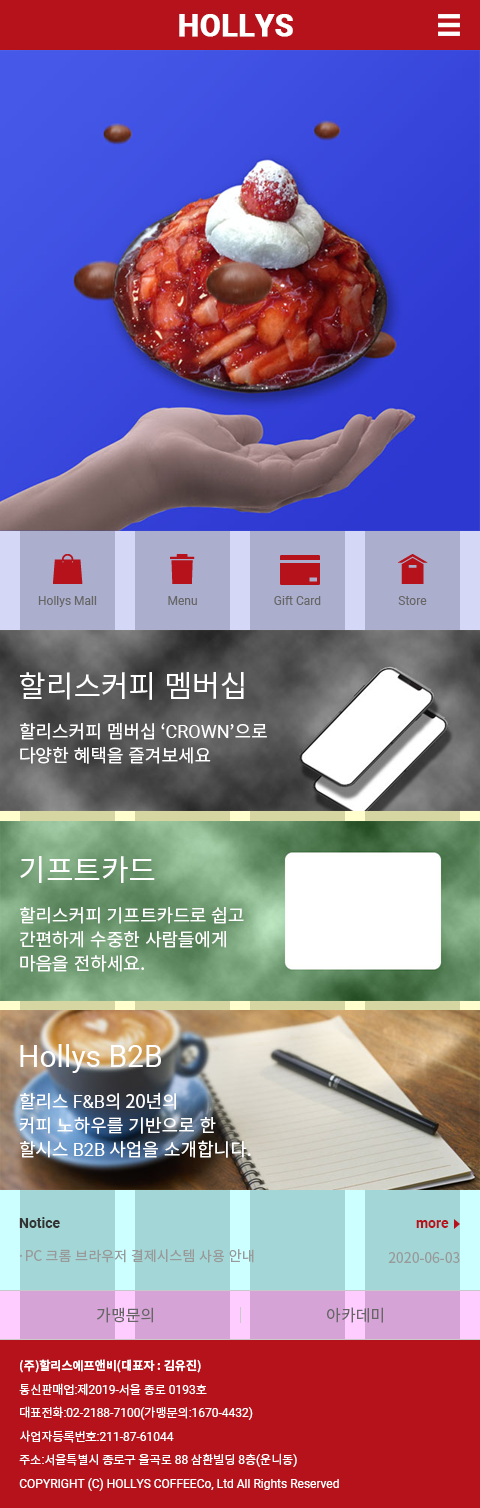
<style>
.page{position:relative;width:480px;height:1508px}
.page>*{position:absolute;margin:0}
.t1{font:30px "Roboto-Bold";color:#ffffff;font-weight:bold}
.t2{font:12px "Roboto-Regular";color:#666666}
.t3{font:30px "NotoSansKR-Regular";color:#ffffff}
.t4{font:18px/24px "NotoSansKR-Regular";color:#ffffff}
.t5{font:18px/24px "Roboto-Regular";color:#ffffff}
.t6{font:30px "Roboto-Regular";color:#ffffff}
.t7{font:14px "Roboto-Bold";color:#333333}
.t8{font:14px "Roboto-Bold";color:#b5121b}
.t9{font:14px "NotoSansKR-Regular";color:#999999}
.t10{font:16px "NotoSansKR-Regular";color:#666666}
.t11{font:12px "NotoSansKR-Bold";color:#ffffff}
.t12{font:12px "NotoSansKR-Regular";color:#ffffff}
.t13{font:12px "Roboto-Regular";color:#ffffff}
</style>
<div class="page">
<p class="t1" style="left:179px;top:14px;width:114px;height:23px">HOLLYS</p>
<p class="t2" style="left:38px;top:596px;width:59px;height:11px">Hollys Mall</p>
<p class="t2" style="left:168px;top:596px;width:29px;height:9px">Menu</p>
<p class="t2" style="left:274px;top:596px;width:47px;height:9px">Gift Card</p>
<p class="t2" style="left:398px;top:596px;width:29px;height:9px">Store</p>
<p class="t3" style="left:20px;top:672px;width:224px;height:28px">할리스커피 멤버십</p>
<p class="t4" style="left:20px;top:722px;width:247px;height:42px">할리스커피 멤버십 ‘<span class="t5">CROWN</span>’으로<br>다양한 혜택을 즐겨보세요</p>
<p class="t3" style="left:20px;top:856px;width:135px;height:27px">기프트카드</p>
<p class="t4" style="left:20px;top:907px;width:224px;height:65px">할리스커피 기프트카드로 쉽고<br>간편하게 수중한 사람들에게<br>마음을 전하세요.</p>
<p class="t6" style="left:20px;top:1044px;width:141px;height:29px">Hollys B2B</p>
<p class="t4" style="left:19px;top:1092px;width:232px;height:66px">할리스 <span class="t5">F&amp;B</span>의 20년의<br>커피 노하우를 기반으로 한<br>할시스 <span class="t5">B2B</span> 사업을 소개합니다.</p>
<p class="t7" style="left:19px;top:1217px;width:41px;height:11px">Notice</p>
<p class="t8" style="left:416px;top:1220px;width:33px;height:8px">more</p>
<p class="t9" style="left:19px;top:1249px;width:235px;height:14px">·PC 크롬 브라우저 결제시스템 사용 안내</p>
<p class="t9" style="left:388px;top:1252px;width:72px;height:11px">2020-06-03</p>
<p class="t10" style="left:97px;top:1307px;width:56px;height:16px">가맹문의</p>
<p class="t10" style="left:327px;top:1307px;width:56px;height:16px">아카데미</p>
<p class="t11" style="left:20px;top:1359px;width:181px;height:14px">(주)할리스에프앤비(대표자 : 김유진)</p>
<p class="t12" style="left:19px;top:1383px;width:188px;height:13px">통신판매업<span class="t13">:</span>제<span class="t13">2019-</span>서울 종로<span class="t13"> 0193</span>호</p>
<p class="t13" style="left:20px;top:1406px;width:233px;height:14px"><span class="t12">대표전화</span>:02-2188-7100(<span class="t12">가맹문의</span>:1670-4432)</p>
<p class="t13" style="left:20px;top:1430px;width:154px;height:13px"><span class="t12">사업자등록번호</span>:211-87-61044</p>
<p class="t12" style="left:19px;top:1453px;width:278px;height:14px">주소<span class="t13">:</span>서울특별시 종로구 율곡로<span class="t13"> 88 </span>삼환빌딩<span class="t13"> 8</span>층<span class="t13">(</span>운니동<span class="t13">)</span></p>
<p class="t13" style="left:19px;top:1478px;width:320px;height:13px">COPYRIGHT (C) HOLLYS COFFEECo, Ltd All Rights Reserved</p>
</div>
